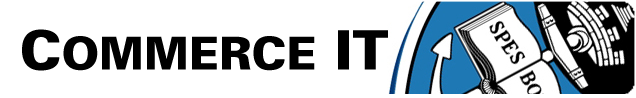
<style>
.page{position:relative;width:636px;height:98px;background:#ffffff}
.page>*{position:absolute;margin:0}
.t1{font:45.2px "USABlackPlain";color:#000000}
.t2{font:54.3px "USABlackPlain";color:#000000}
</style>
<div class="page">
<p class="t1" style="left:22px;top:29px;width:366px;height:42px"><span class="t2">C</span>OMMERCE<span class="t2"> IT</span></p>
</div>
